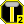
<style>
.page{position:relative;width:24px;height:24px;background:#000000}
.page>*{position:absolute;margin:0}
.t1{font:9px "Montserrat-Bold";color:#000000}
</style>
<div class="page">
<p class="t1" style="left:18px;top:16px;width:5px;height:7px">2</p>
</div>
